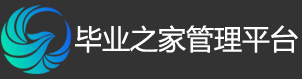
<style>
.page{position:relative;width:302px;height:79px;background:#333333}
.page>*{position:absolute;margin:0}
.t1{font:28px "MicrosoftYaHei";color:#fffefe}
</style>
<div class="page">
<p class="t1" style="left:75px;top:25px;width:223px;height:28px">毕业之家管理平台</p>
</div>
